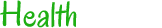
<style>
.page{position:relative;width:162px;height:28px;background:#ffffff}
.page>*{position:absolute;margin:0}
.t1{font:36px "Oregano-Regular";color:#1eaf13}
.t2{font:36px "Oregano-Regular";color:#ffffff}
</style>
<div class="page">
<p class="t1" style="left:0px;top:0px;width:162px;height:28px">Health<span class="t2"> Coach</span></p>
</div>
